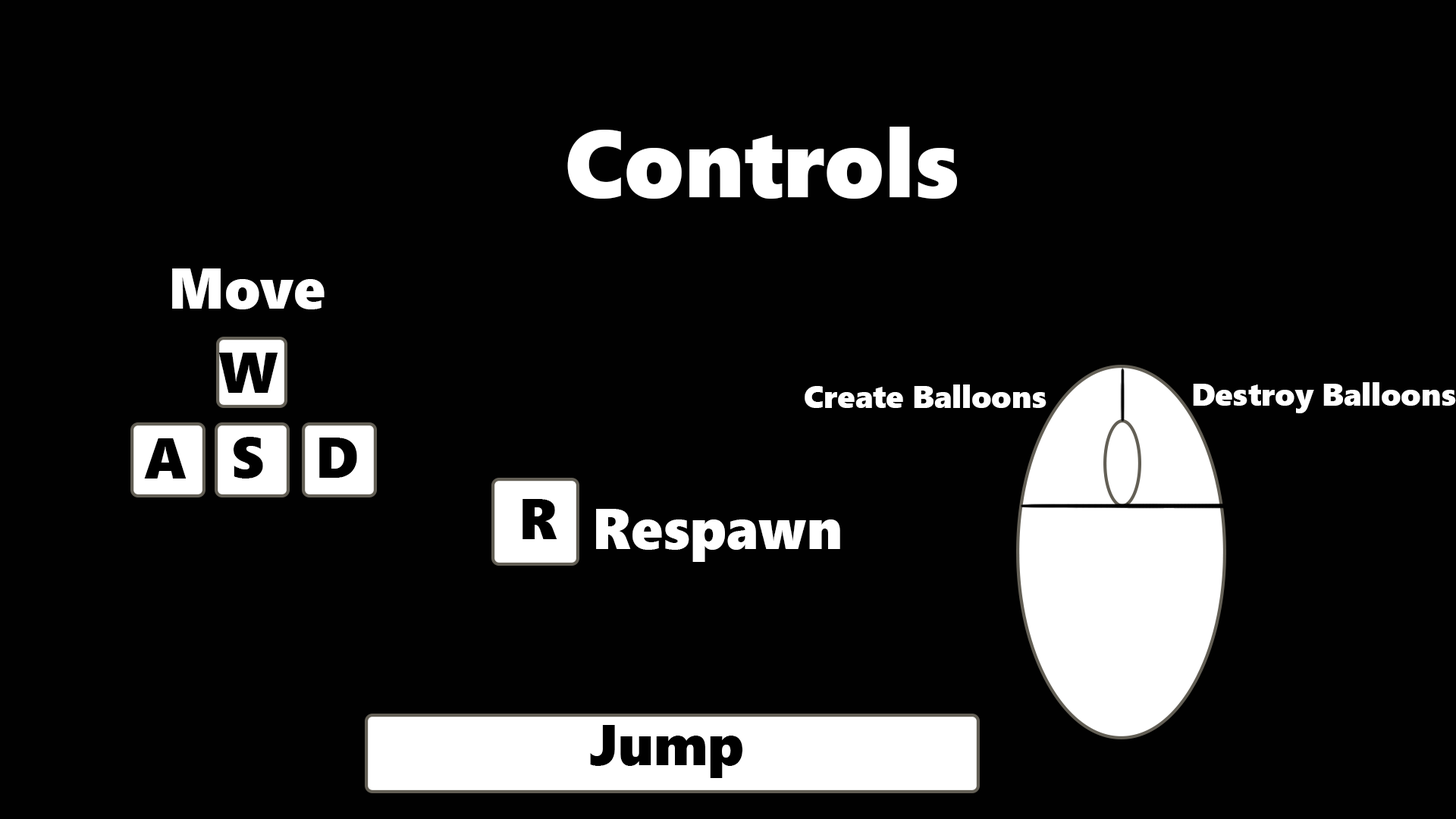
<style>
.page{position:relative;width:1456px;height:819px;background:#010101}
.page>*{position:absolute;margin:0}
.t1{font:94.8px "SegoeUIBlack";color:#ffffff}
.t2{font:56.9px "SegoeUIBlack";color:#ffffff}
.t3{font:56.9px "SegoeUIBlack";color:#000000}
.t4{font:31.6px "SegoeUIBlack";color:#ffffff}
</style>
<div class="page">
<p class="t1" style="left:567px;top:127px;width:390px;height:72px">Controls</p>
<p class="t2" style="left:172px;top:268px;width:153px;height:41px">Move</p>
<p class="t3" style="left:218px;top:353px;width:60px;height:40px">W</p>
<p class="t4" style="left:805px;top:384px;width:241px;height:24px">Create Balloons</p>
<p class="t4" style="left:1193px;top:382px;width:263px;height:31px">Destroy Balloons</p>
<p class="t3" style="left:234px;top:437px;width:29px;height:42px">S</p>
<p class="t3" style="left:319px;top:438px;width:38px;height:40px">D</p>
<p class="t3" style="left:144px;top:438px;width:43px;height:41px">A</p>
<p class="t3" style="left:522px;top:499px;width:35px;height:40px">R</p>
<p class="t2" style="left:596px;top:509px;width:244px;height:53px">Respawn</p>
<p class="t3" style="left:590px;top:725px;width:152px;height:53px">Jump</p>
</div>
